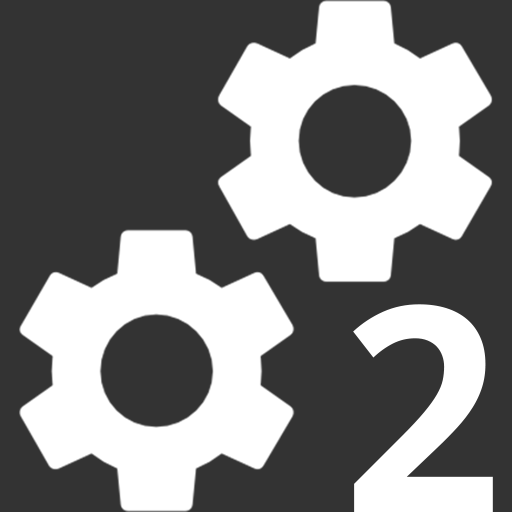
<style>
.page{position:relative;width:512px;height:512px;background:#333333}
.page>*{position:absolute;margin:0}
.t1{font:319.9px "Consolas-Bold";color:#ffffff}
</style>
<div class="page">
<p class="t1" style="left:353px;top:304px;width:140px;height:208px">2</p>
</div>
